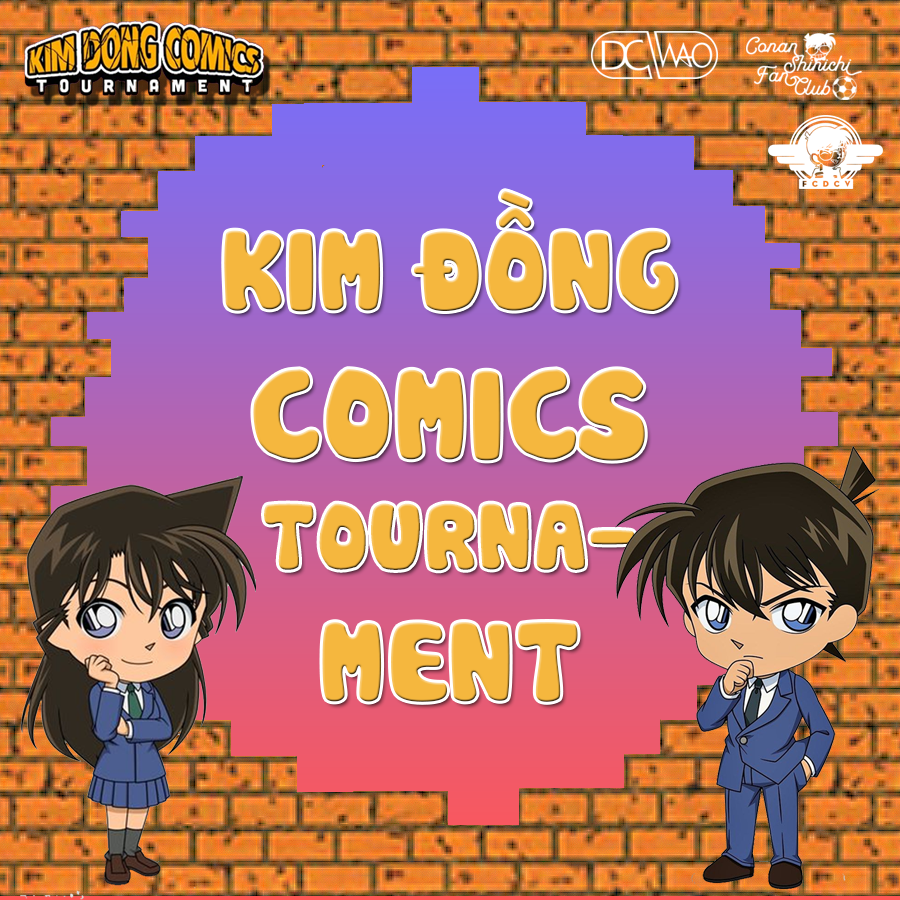
<style>
.page{position:relative;width:900px;height:900px}
.page>*{position:absolute;margin:0}
.t1{font:110px "UTM-Cookies";color:#f5b73e}
.t2{font:124.3px "UTM-Cookies";color:#f5b73e}
.t3{font:91.3px "UTM-Cookies";color:#f5b73e}
</style>
<div class="page">
<p class="t1" style="left:224px;top:191px;width:452px;height:511px;text-align:center">KIM ĐỒNG<br><span class="t2">COMICS<br></span><span class="t3">TOURNA-<br></span>MENT</p>
</div>
